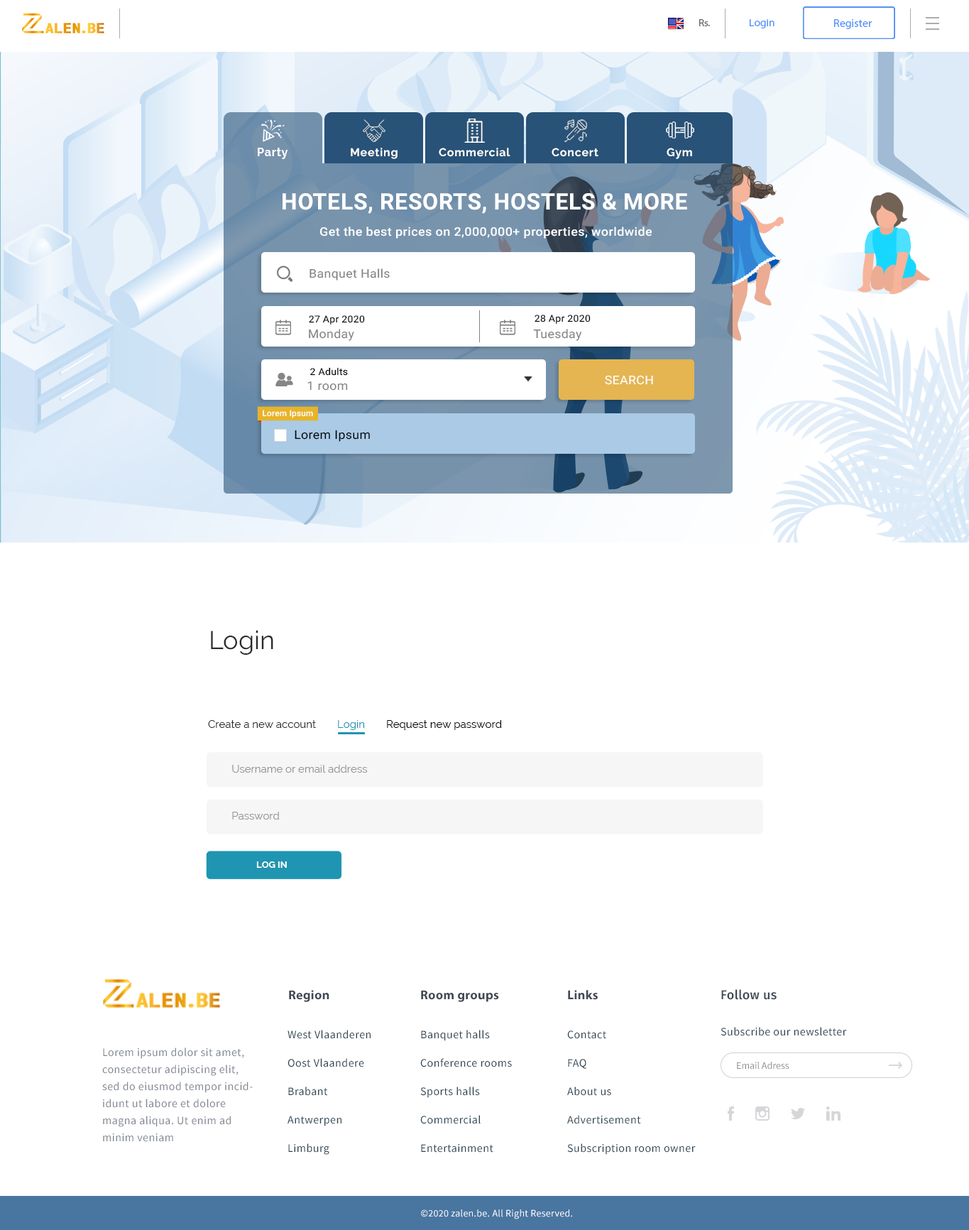
<style>
.page{position:relative;width:969px;height:1230px;background:#ffffff}
.page>*{position:absolute;margin:0}
.t1{font:10px "MyriadPro-Regular";color:#636363;scale:1.04 1}
.t2{font:10.4px "MyriadPro-Regular";color:#5392f9;scale:1.07 1}
.t3{font:11.4px "MyriadPro-Regular";color:#5392f9}
.t4{font:8.5px "Raleway-Bold";letter-spacing:0.05em;color:#ffffff}
.t5{font:22.7px "Roboto-Bold";letter-spacing:0.02em;color:#ffffff}
.t6{font:12px "Roboto-Medium";letter-spacing:0.02em;color:#ffffff;scale:1.07 1}
.t7{font:11.9px "Roboto-Regular";letter-spacing:0.02em;color:#818181;scale:1.06 1}
.t8{font:9.5px "Roboto-Regular";letter-spacing:0.02em;color:#000000;scale:1.06 1}
.t9{font:11.9px "Roboto-Regular";letter-spacing:0.02em;color:#ffffff;scale:1.06 1}
.t10{font:8.4px "Roboto-Medium";letter-spacing:0.02em;color:#ffffff}
.t11{font:11.9px "Roboto-Regular";letter-spacing:0.02em;color:#000000;scale:1.06 1}
.t12{font:25.6px "Raleway-Regular";color:#2d2a2a}
.t13{font:10.7px "Raleway-Regular";color:#2d2a2a}
.t14{font:10.7px "Raleway-Regular";color:#1f95b1}
.t15{font:10.7px "Raleway-Regular";color:#000000}
.t16{font:10.7px "Raleway-Regular";color:#959595}
.t17{font:9.2px "Raleway-Bold";color:#ffffff}
.t18{font:12.8px "FiraSans-Medium";letter-spacing:0.02em;color:#424955}
.t19{font:12.8px "MyriadPro-Bold";letter-spacing:0.02em;color:#424955}
.t20{font:11.4px/28.4px "SourceSansPro-Regular";letter-spacing:0.03em;color:#2e4453}
.t21{font:11.4px "SourceSansPro-Regular";letter-spacing:0.03em;color:#2e4453}
.t22{font:11.4px/17px "SourceSansPro-Regular";letter-spacing:0.03em;color:#818791}
.t23{font:9.9px "SourceSansPro-Regular";color:#8c8c8c}
.t24{font:9.9px "SourceSansPro-Regular";letter-spacing:0.02em;color:#ffffff}
</style>
<div class="page">
<p class="t1" style="left:700px;top:19px;width:10px;height:7px">Rs.</p>
<p class="t2" style="left:750px;top:19px;width:25px;height:9px">Login</p>
<p class="t3" style="left:834px;top:19px;width:38px;height:10px">Register</p>
<p class="t4" style="left:258px;top:148px;width:30px;height:11px">Party</p>
<p class="t4" style="left:351px;top:148px;width:47px;height:11px">Meeting</p>
<p class="t4" style="left:439px;top:148px;width:72px;height:9px">Commercial</p>
<p class="t4" style="left:552px;top:148px;width:47px;height:9px">Concert</p>
<p class="t4" style="left:667px;top:148px;width:25px;height:11px">Gym</p>
<p class="t5" style="left:283px;top:193px;width:404px;height:21px">HOTELS, RESORTS, HOSTELS &amp; MORE</p>
<p class="t6" style="left:320px;top:227px;width:332px;height:12px">Get the best prices on 2,000,000+ properties, worldwide</p>
<p class="t7" style="left:310px;top:268px;width:80px;height:13px">Banquet Halls</p>
<p class="t8" style="left:309px;top:315px;width:56px;height:10px">27 Apr 2020</p>
<p class="t8" style="left:535px;top:315px;width:56px;height:9px">28 Apr 2020</p>
<p class="t7" style="left:309px;top:329px;width:45px;height:12px">Monday</p>
<p class="t7" style="left:533px;top:329px;width:49px;height:12px">Tuesday</p>
<p class="t8" style="left:310px;top:367px;width:38px;height:9px">2 Adults</p>
<p class="t9" style="left:605px;top:375px;width:48px;height:10px">SEARCH</p>
<p class="t7" style="left:308px;top:381px;width:40px;height:10px">1 room</p>
<p class="t10" style="left:263px;top:410px;width:50px;height:8px">Lorem Ipsum</p>
<p class="t11" style="left:295px;top:430px;width:75px;height:12px">Lorem Ipsum</p>
<p class="t12" style="left:211px;top:630px;width:62px;height:25px">Login</p>
<p class="t13" style="left:208px;top:720px;width:108px;height:8px">Create a new account</p>
<p class="t14" style="left:338px;top:720px;width:27px;height:10px">Login</p>
<p class="t15" style="left:387px;top:720px;width:115px;height:10px">Request new password</p>
<p class="t16" style="left:232px;top:765px;width:136px;height:8px">Username or email address</p>
<p class="t16" style="left:232px;top:812px;width:48px;height:8px">Password</p>
<p class="t17" style="left:256px;top:861px;width:31px;height:7px">LOG IN</p>
<p class="t18" style="left:722px;top:989px;width:55px;height:11px">Follow us</p>
<p class="t19" style="left:289px;top:990px;width:41px;height:12px">Region</p>
<p class="t19" style="left:421px;top:990px;width:78px;height:12px">Room groups</p>
<p class="t19" style="left:568px;top:990px;width:30px;height:10px">Links</p>
<p class="t20" style="left:288px;top:1030px;width:83px;height:125px">West Vlaanderen<br>Oost Vlaandere<br>Brabant<br>Antwerpen<br>Limburg</p>
<p class="t20" style="left:420px;top:1030px;width:92px;height:123px">Banquet halls<br>Conference rooms<br>Sports halls<br>Commercial<br>Entertainment</p>
<p class="t20" style="left:567px;top:1030px;width:129px;height:125px">Contact<br>FAQ<br>About us<br>Advertisement<br>Subscription room owner</p>
<p class="t21" style="left:721px;top:1027px;width:126px;height:9px">Subscribe our newsletter</p>
<p class="t22" style="left:102px;top:1048px;width:151px;height:94px">Lorem ipsum dolor sit amet, consectetur adipiscing elit, sed do eiusmod tempor incididunt ut labore et dolore magna aliqua. Ut enim ad minim veniam</p>
<p class="t23" style="left:737px;top:1062px;width:53px;height:8px">Email Adress</p>
<p class="t24" style="left:421px;top:1209px;width:151px;height:10px">©2020 zalen.be. All Right Reserved.</p>
</div>
